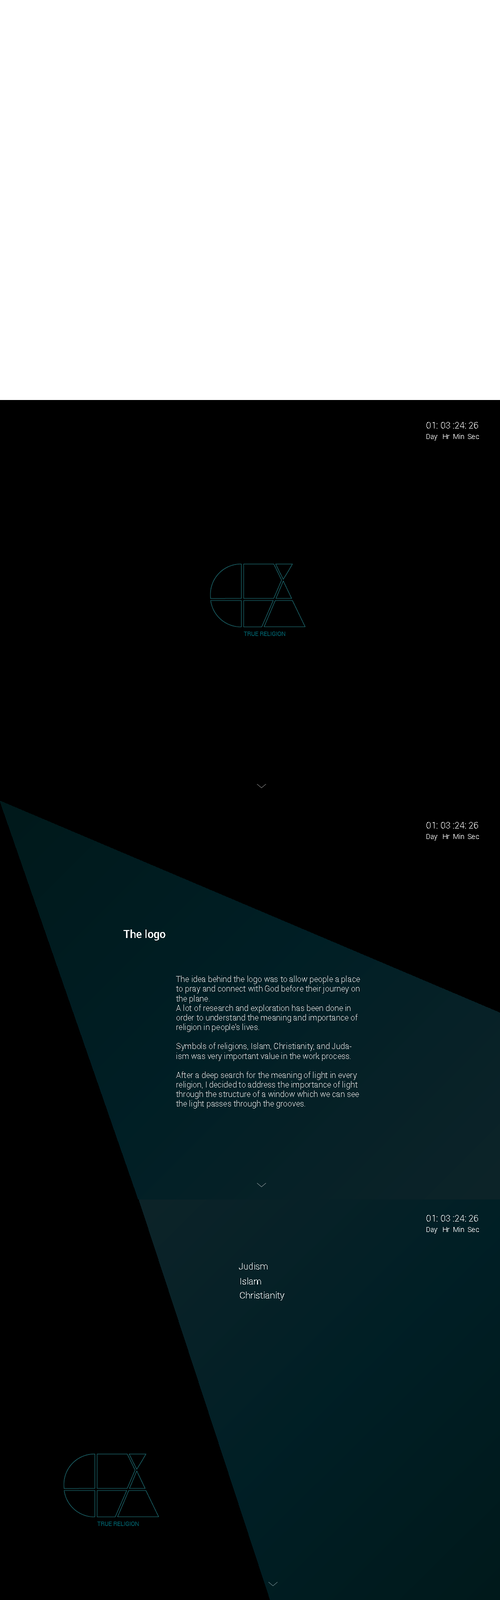
<style>
.page{position:relative;width:500px;height:1600px;background:#000000}
.page>*{position:absolute;margin:0}
.t1{font:9px "Roboto-Light";color:#ffffff}
.t2{font:7px "Roboto-Light";color:#ffffff}
.t3{font:11px "Roboto-Medium";color:#ffffff}
.t4{font:8px "Roboto-Light";color:#dcdbdb}
.t5{font:9px "Roboto-Thin";color:#ffffff}
</style>
<div class="page">
<p class="t1" style="left:426px;top:422px;width:52px;height:6px">01: 03 :24: 26</p>
<p class="t2" style="left:426px;top:434px;width:53px;height:6px">Day   Hr  Min  Sec</p>
<p class="t1" style="left:426px;top:822px;width:52px;height:6px">01: 03 :24: 26</p>
<p class="t2" style="left:426px;top:834px;width:53px;height:6px">Day   Hr  Min  Sec</p>
<p class="t3" style="left:124px;top:930px;width:42px;height:10px">The logo</p>
<p class="t4" style="left:176px;top:976px;width:184px;height:132px">The idea behind the logo was to allow people a place to pray and connect with God before their journey on the plane.<br>A lot of research and exploration has been done in order to understand the meaning and importance of religion in people's lives.<br><br>Symbols of religions, Islam, Christianity, and Judaism was very important value in the work process.<br><br>After a deep search for the meaning of light in every religion, I decided to address the importance of light through the structure of a window which we can see the light passes through the grooves.</p>
<p class="t1" style="left:426px;top:1215px;width:52px;height:7px">01: 03 :24: 26</p>
<p class="t2" style="left:426px;top:1226px;width:53px;height:8px">Day   Hr  Min  Sec</p>
<p class="t5" style="left:239px;top:1262px;width:29px;height:8px">Judism</p>
<p class="t1" style="left:240px;top:1278px;width:21px;height:6px">Islam</p>
<p class="t1" style="left:240px;top:1292px;width:44px;height:8px">Christianity</p>
</div>
